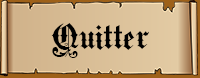
<style>
.page{position:relative;width:200px;height:78px}
.page>*{position:absolute;margin:0}
.t1{font:36.2px "MediciText";color:#000000}
</style>
<div class="page">
<p class="t1" style="left:51px;top:23px;width:98px;height:35px">Quitter</p>
</div>
